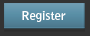
<style>
.page{position:relative;width:90px;height:36px;background:#333333}
.page>*{position:absolute;margin:0}
.t1{font:12px "BellGothicStd-Bold";color:#ffffff;scale:1.05 1}
</style>
<div class="page">
<p class="t1" style="left:22px;top:11px;width:44px;height:11px">Register</p>
</div>
